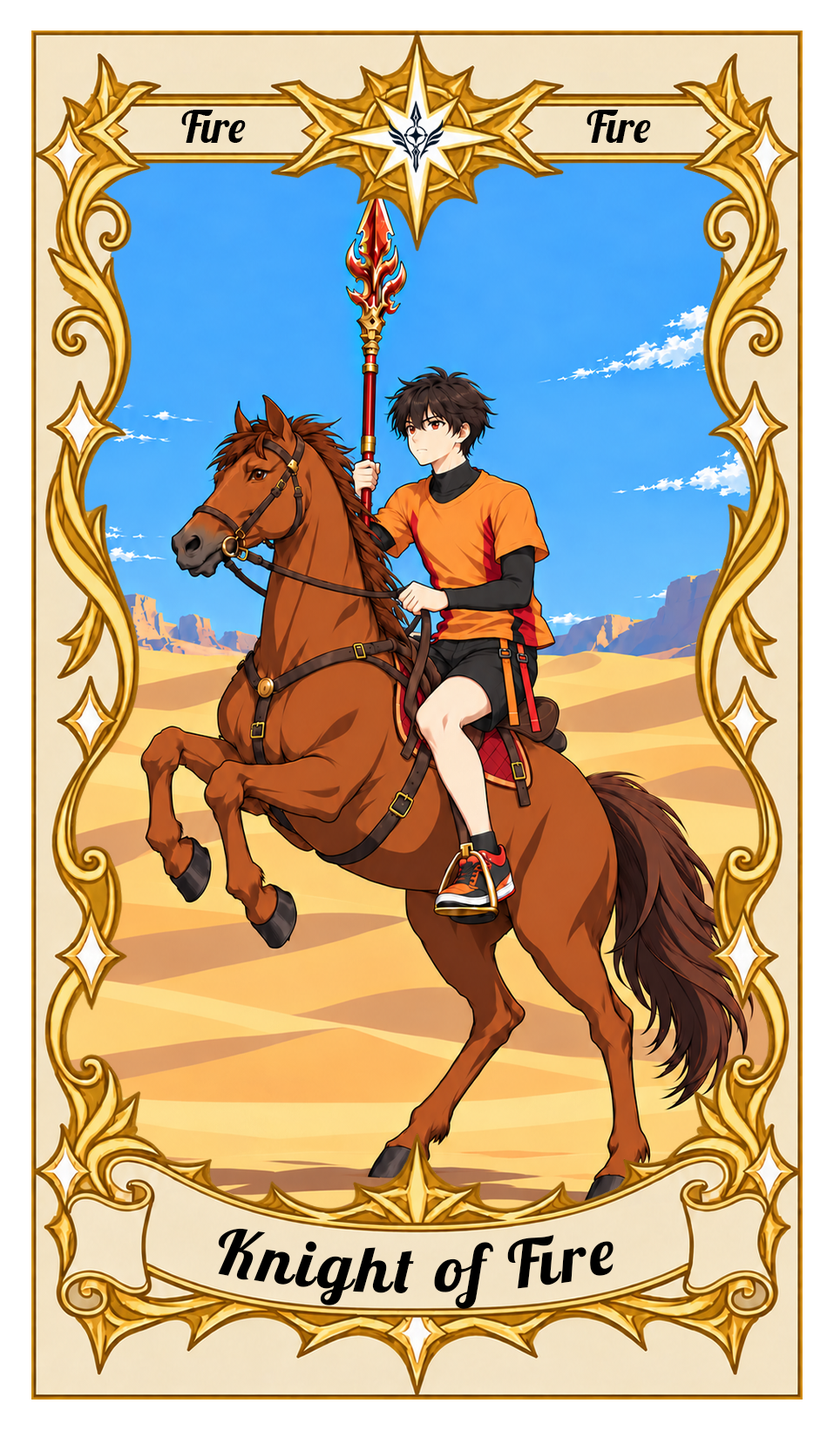
<style>
.page{position:relative;width:834px;height:1430px}
.page>*{position:absolute;margin:0}
.t1{font:43.6px "Lobster-Regular";color:#000000}
.t2{font:65.3px "Lobster-Regular";letter-spacing:0.05em;color:#000000}
</style>
<div class="page">
<p class="t1" style="left:181px;top:110px;width:65px;height:33px">Fire</p>
<p class="t1" style="left:586px;top:110px;width:65px;height:33px">Fire</p>
<p class="t2" style="left:218px;top:1228px;width:395px;height:81px">Knight of Fire</p>
</div>
